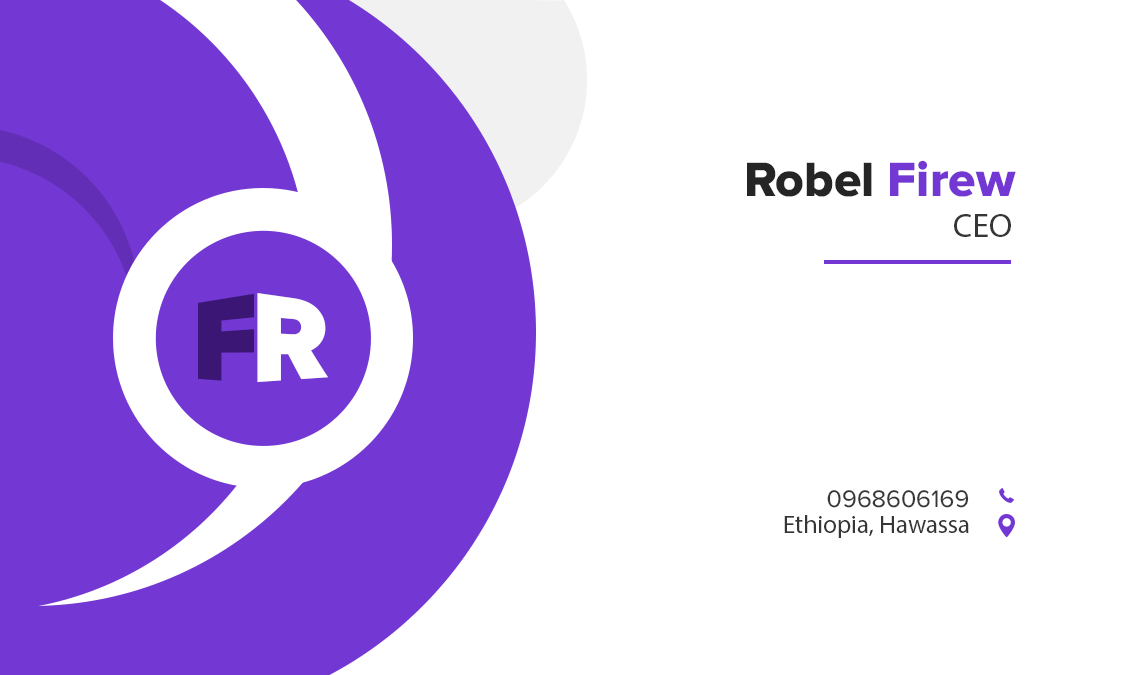
<style>
.page{position:relative;width:1125px;height:675px;background:#ffffff}
.page>*{position:absolute;margin:0}
.t1{font:50px "ProximaNova-Extrabld";color:#252525}
.t2{font:50px "ProximaNova-Extrabld";color:#7337d3}
.t3{font:33.3px "MyriadPro-Regular";color:#363636}
.t4{font:111.4px "Axiforma-Heavy";letter-spacing:-0.02em;color:#3b1674}
.t5{font:111.4px "Axiforma-Heavy";letter-spacing:-0.02em;color:#ffffff}
.t6{font:24.8px "ProximaNova-Regular";color:#363636}
.t7{font:25.3px "MyriadPro-Regular";color:#363636}
</style>
<div class="page">
<p class="t1" style="left:747px;top:160px;width:269px;height:37px">Robel <span class="t2">Firew</span></p>
<p class="t3" style="left:954px;top:214px;width:57px;height:23px">CEO</p>
<p class="t4" style="left:198px;top:292px;width:62px;height:89px">F</p>
<p class="t5" style="left:257px;top:293px;width:72px;height:89px">R</p>
<p class="t6" style="left:827px;top:490px;width:142px;height:18px">0968606169</p>
<p class="t7" style="left:784px;top:515px;width:185px;height:23px">Ethiopia, Hawassa</p>
</div>
